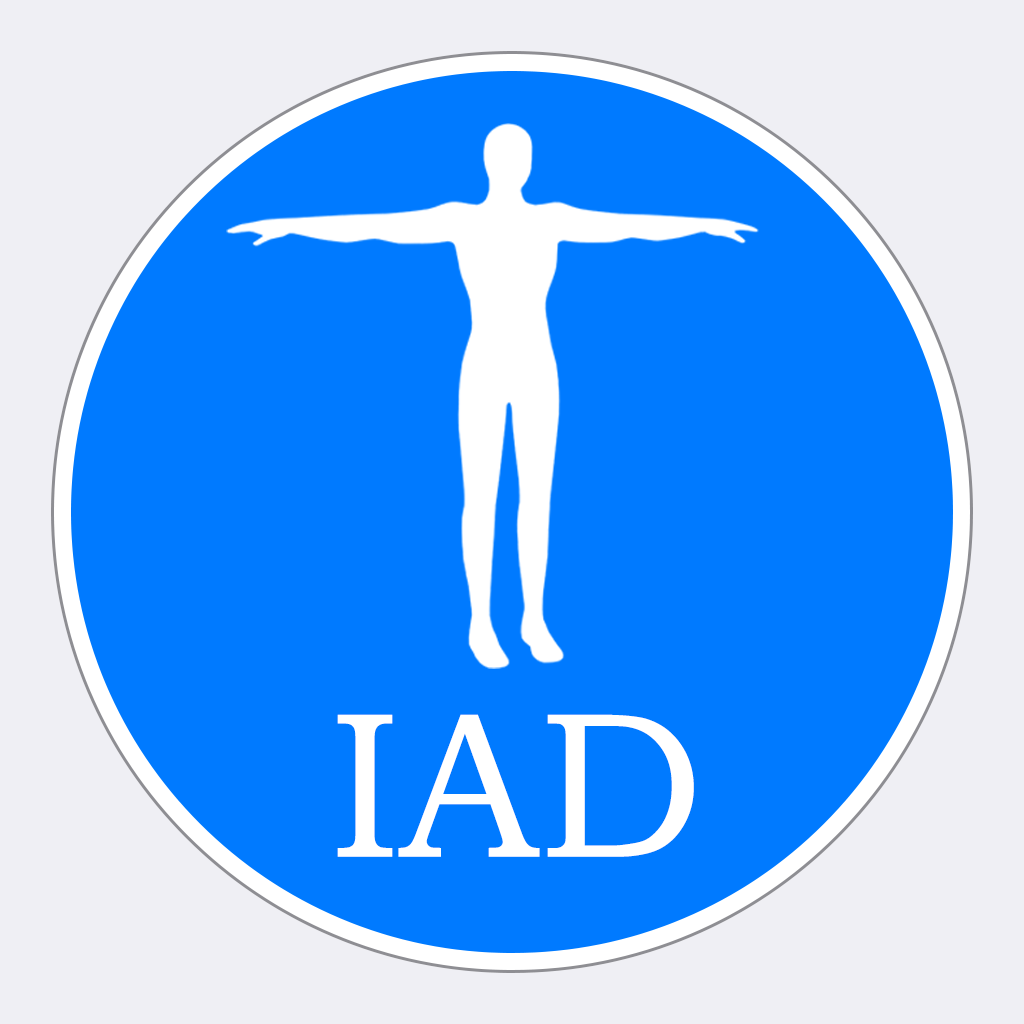
<style>
.page{position:relative;width:1024px;height:1024px;background:#007aff}
.page>*{position:absolute;margin:0}
.t1{font:208.3px "BookmanOldStyle";letter-spacing:-0.01em;color:#ffffff}
</style>
<div class="page">
<p class="t1" style="left:337px;top:714px;width:357px;height:143px">IAD</p>
</div>
